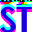
<style>
.page{position:relative;width:32px;height:32px;background:#ffffff}
.page>*{position:absolute;margin:0}
.t1{font:37.8px "CenturyGothic-Bold";letter-spacing:0.2em;scale:0.95 1}
</style>
<div class="page">
<p class="t1" style="left:0px;top:1px;width:16px;height:30px">S</p>
</div>
